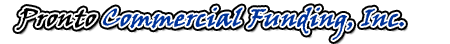
<style>
.page{position:relative;width:450px;height:44px;background:#ffffff}
.page>*{position:absolute;margin:0}
.t1{font:24px "VinerHandITC";color:#003399;font-weight:bold;font-style:italic}
.t2{font:24px "VinerHandITC";color:#000000;font-weight:bold;font-style:italic}
</style>
<div class="page">
<p class="t1" style="left:16px;top:7px;width:388px;height:33px">Pronto Commercial Funding, Inc.</p>
<p class="t1" style="left:16px;top:7px;width:388px;height:33px"><span class="t2">Pronto </span>Commercial Funding, Inc.</p>
</div>
